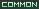
<style>
.page{position:relative;width:39px;height:9px;background:#333333}
.page>*{position:absolute;margin:0}
.t1{font:8px "5x5-Pixel"}
</style>
<div class="page">
<p class="t1" style="left:2px;top:2px;width:35px;height:5px">common</p>
</div>
